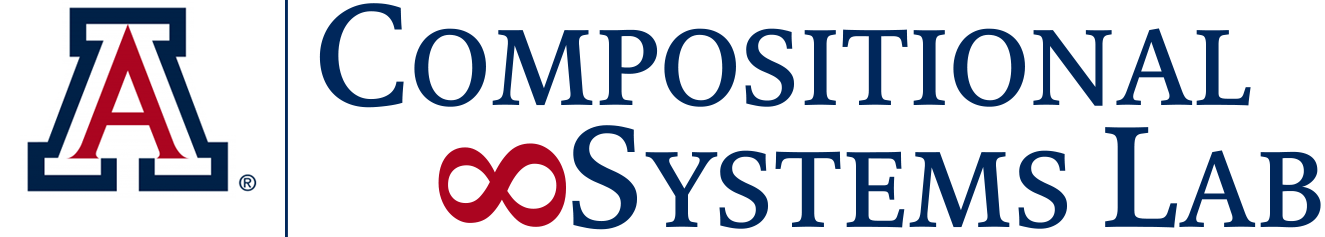
<style>
.page{position:relative;width:1325px;height:237px;background:#ffffff}
.page>*{position:absolute;margin:0}
.t1{font:120px/122px "MiloSerifComp-Medium";color:#00275b}
.t2{font:160px/122px "MiloSerifComp-Medium";color:#00275b}
.t3{font:196px "MiloSerifComp-Medium";color:#ab0520}
</style>
<div class="page">
<p class="t1" style="left:319px;top:3px;width:1002px;height:227px"><span class="t2">C</span>OMPOSITIONAL<br>        <span class="t2">S</span>YSTEMS <span class="t2">L</span>AB</p>
<p class="t3" style="left:438px;top:143px;width:128px;height:84px;rotate:-90deg">8</p>
</div>
